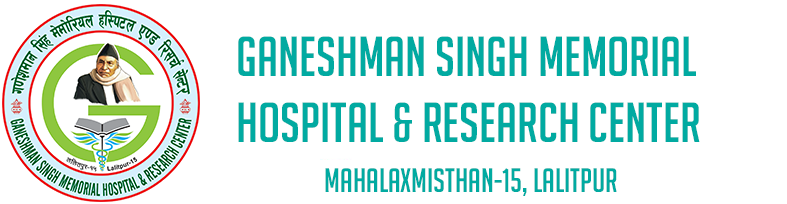
<style>
.page{position:relative;width:787px;height:204px;background:#ffffff}
.page>*{position:absolute;margin:0}
.t1{font:55px "BigNoodleTitling";color:#01aaa1}
.t2{font:33px/50px "BigNoodleTitling";color:#01aaa1}
</style>
<div class="page">
<p class="t1" style="left:238px;top:36px;width:462px;height:160px;text-align:center">GANESHMAN SINGH MEMORIAL <br>HOSPITAL &amp; RESEARCH CENTER <br><span class="t2">MAHALAXMISTHAN-15, LALITPUR</span></p>
</div>
